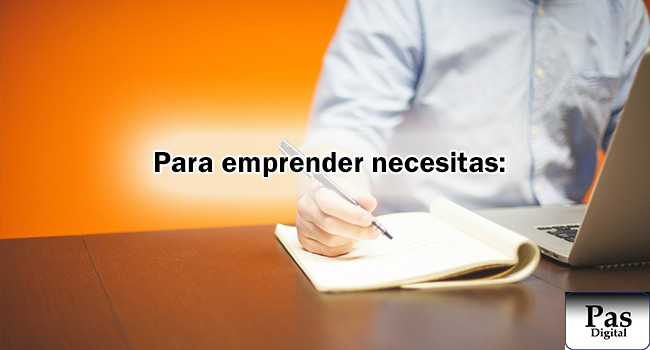
<style>
.page{position:relative;width:650px;height:350px}
.page>*{position:absolute;margin:0}
.t1{font:30px "FranklinGothic-Demi";color:#000000}
</style>
<div class="page">
<p class="t1" style="left:155px;top:151px;width:350px;height:26px">Para emprender necesitas:</p>
</div>
